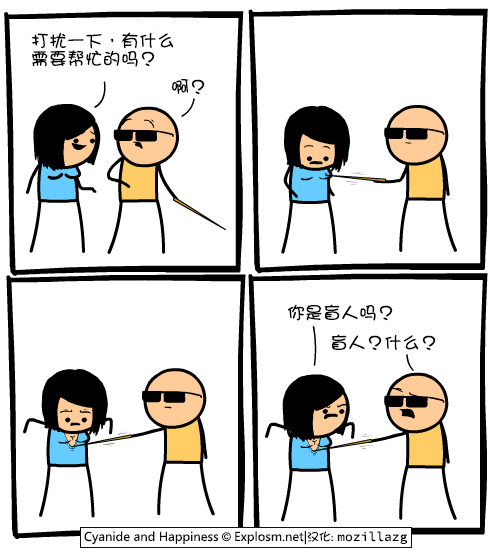
<style>
.page{position:relative;width:500px;height:560px;background:#ffffff}
.page>*{position:absolute;margin:0}
.t1{font:18px/18px "DFGirl";color:#000000}
.t2{font:18px "DFGirl";color:#000000}
</style>
<div class="page">
<p class="t1" style="left:31px;top:32px;width:143px;height:35px">打扰一下，有什么<br>需要帮忙的吗？</p>
<p class="t2" style="left:172px;top:79px;width:33px;height:16px">啊？</p>
<p class="t2" style="left:287px;top:304px;width:106px;height:17px">你是盲人吗？</p>
<p class="t2" style="left:331px;top:334px;width:105px;height:17px">盲人？什么？</p>
</div>
